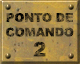
<style>
.page{position:relative;width:80px;height:64px}
.page>*{position:absolute;margin:0}
.t1{font:12px/14.7px "Arial-Black";letter-spacing:-0.015em;text-transform:uppercase}
.t2{font:20px/20px "Arial-Black";letter-spacing:-0.055em;text-transform:uppercase}
</style>
<div class="page">
<p class="t1" style="left:6px;top:13px;width:68px;height:44px;text-align:center">Ponto de<br>comando<br><span class="t2">2</span></p>
</div>
